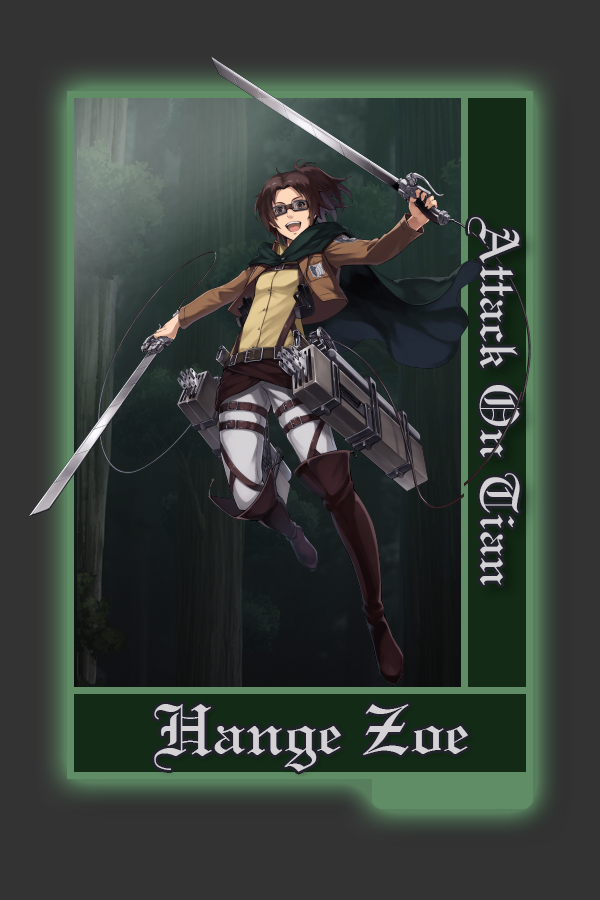
<style>
.page{position:relative;width:600px;height:900px;background:#333333}
.page>*{position:absolute;margin:0}
.t1{font:58.3px "Linotext";color:#d7d4d4}
.t2{font:75px "Linotext";color:#d7d4d4}
</style>
<div class="page">
<p class="t1" style="left:468px;top:217px;width:52px;height:368px;rotate:90deg">Attack On Tian</p>
<p class="t2" style="left:154px;top:704px;width:314px;height:68px">Hange Zoe</p>
</div>
